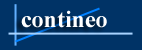
<style>
.page{position:relative;width:142px;height:50px;background:#003366}
.page>*{position:absolute;margin:0}
.t1{font:24px "TimesNewRomanPS-BoldMT";color:#ffffff}
</style>
<div class="page">
<p class="t1" style="left:21px;top:10px;width:86px;height:18px">contineo</p>
</div>
